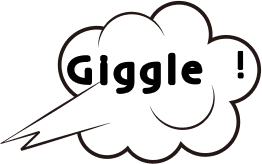
<style>
.page{position:relative;width:262px;height:164px;background:#ffffff}
.page>*{position:absolute;margin:0}
.t1{font:39.3px "Skia";color:#000000}
</style>
<div class="page">
<p class="t1" style="left:69px;top:54px;width:132px;height:38px">G i g g l e</p>
<p class="t1" style="left:238px;top:51px;width:5px;height:27px">!</p>
</div>
